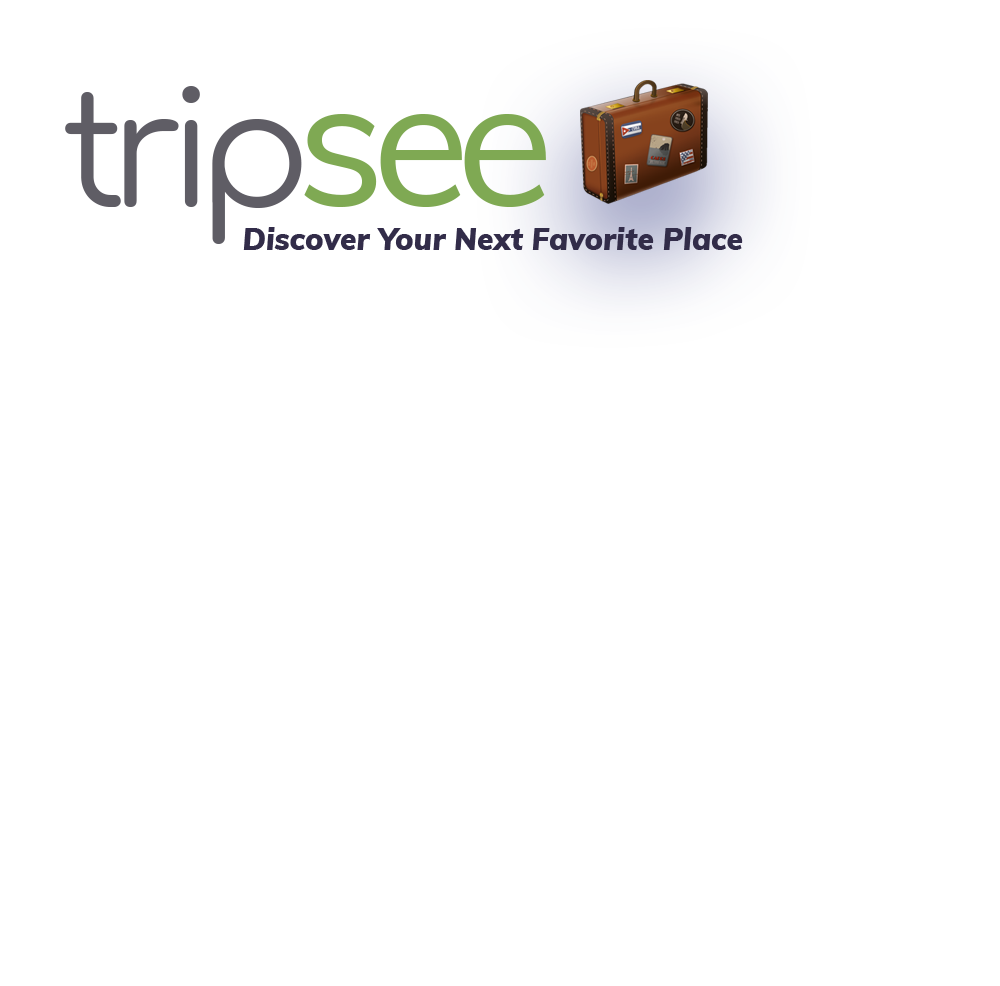
<style>
.page{position:relative;width:1000px;height:986px;background:#ffffff}
.page>*{position:absolute;margin:0}
.t1{font:160px "Comfortaa-Regular";letter-spacing:-0.1em;color:#5f5d65}
.t2{font:180px "Muli-Regular";letter-spacing:-0.075em;color:#7fa953}
.t3{font:30px "Muli-BlackItalic";color:#322c49}
</style>
<div class="page">
<p class="t1" style="left:65px;top:86px;width:237px;height:158px">trip</p>
<p class="t2" style="left:304px;top:114px;width:242px;height:93px">see</p>
<p class="t3" style="left:243px;top:227px;width:500px;height:23px">Discover Your Next Favorite Place</p>
</div>
